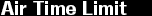
<style>
.page{position:relative;width:152px;height:16px;background:#000000}
.page>*{position:absolute;margin:0}
.t1{font:17px "FolkPro-Heavy";color:#ffffff}
</style>
<div class="page">
<p class="t1" style="left:1px;top:1px;width:126px;height:14px">Air Time Limit</p>
</div>
